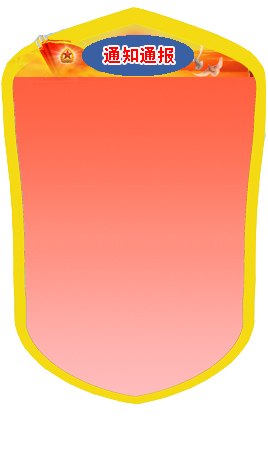
<style>
.page{position:relative;width:268px;height:450px;background:#ffffff}
.page>*{position:absolute;margin:0}
.t1{font:18px "SimHei";color:#ff0000}
</style>
<div class="page">
<p class="t1" style="left:104px;top:47px;width:70px;height:16px">通知通报</p>
</div>
